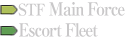
<style>
.page{position:relative;width:129px;height:39px;background:#ffffff}
.page>*{position:absolute;margin:0}
.t1{font:18px/21px "RyuminPro-ExBold";letter-spacing:-0.08em;color:#c9c8c9;scale:0.9 1}
.t2{font:16px/21px "RyuminPro-ExBold";letter-spacing:-0.08em;color:#c9c8c9;scale:0.9 1}
</style>
<div class="page">
<p class="t1" style="left:18px;top:2px;width:107px;height:35px"><span class="t2">STF</span> Main Force<br>Escort Fleet</p>
</div>
